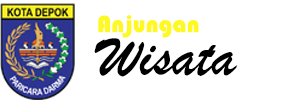
<style>
.page{position:relative;width:300px;height:100px;background:#ffffff}
.page>*{position:absolute;margin:0}
.t1{font:24px "Bauhaus93";color:#fff921}
.t2{font:60px "BrushScriptMT";color:#000000}
</style>
<div class="page">
<p class="t1" style="left:98px;top:15px;width:101px;height:23px">Anjungan</p>
<p class="t2" style="left:94px;top:38px;width:143px;height:39px">Wisata</p>
</div>
